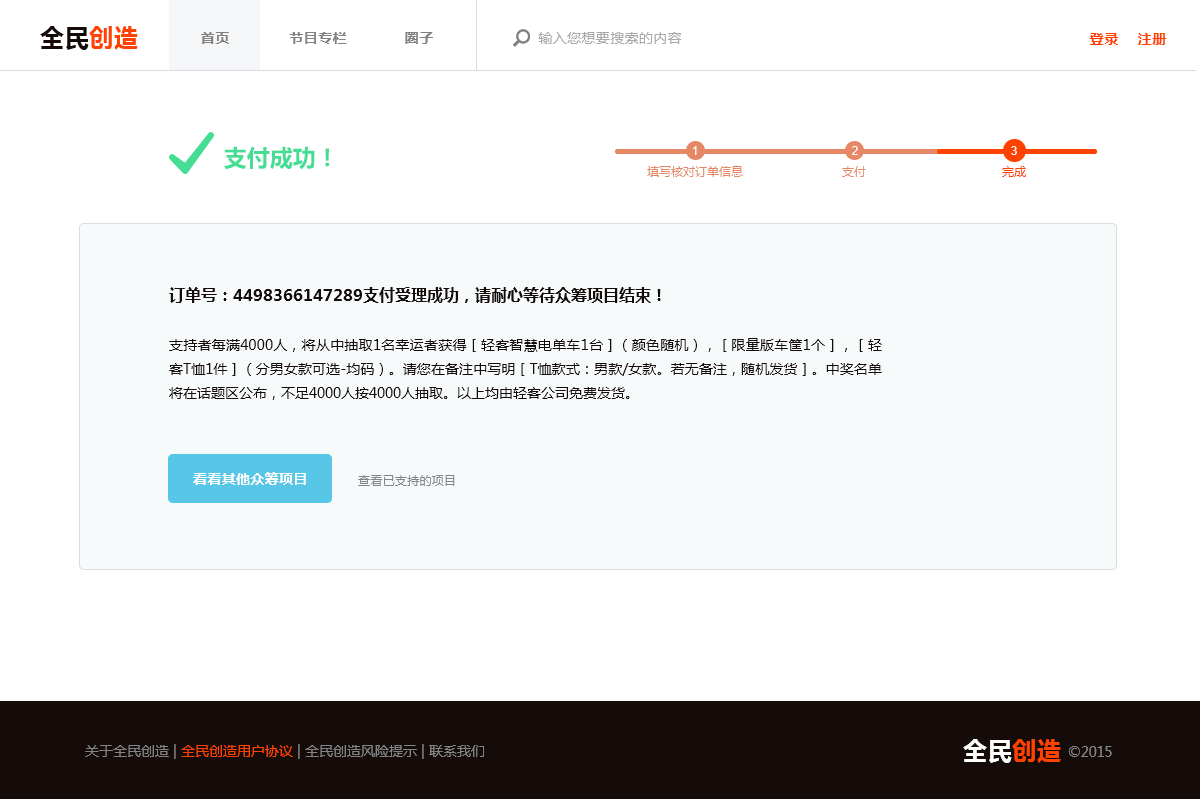
<style>
.page{position:relative;width:1200px;height:799px;background:#ffffff}
.page>*{position:absolute;margin:0}
.t1{font:24px "MicrosoftYaHei-Bold";letter-spacing:0.025em;color:#150b09}
.t2{font:24px "MicrosoftYaHei-Bold";letter-spacing:0.025em;color:#ff4200}
.t3{font:14px "MicrosoftYaHei-Bold";letter-spacing:0.025em;color:#828282}
.t4{font:14px "MicrosoftYaHei";letter-spacing:0.025em;color:#a9a9a9}
.t5{font:14px "MicrosoftYaHei-Bold";letter-spacing:0.05em;color:#ff4200}
.t6{font:23px "MicrosoftYaHei-Bold";color:#44dd93}
.t7{font:12px "ArialMT";letter-spacing:0.025em;color:#ffffff}
.t8{font:12px "MicrosoftYaHei";color:#e68766}
.t9{font:12px "MicrosoftYaHei";color:#ff4200}
.t10{font:16px "MicrosoftYaHei-Bold";color:#150b09}
.t11{font:14px/24px "MicrosoftYaHei";color:#150b09}
.t12{font:14px "MicrosoftYaHei-Bold";letter-spacing:0.025em;color:#ffffff}
.t13{font:12px "MicrosoftYaHei";letter-spacing:0.025em;color:#828587}
.t14{font:14px "MicrosoftYaHei";color:#828587}
.t15{font:14px "MicrosoftYaHei";color:#ff4200}
.t16{font:24px "MicrosoftYaHei-Bold";letter-spacing:0.025em;color:#ffffff}
</style>
<div class="page">
<p class="t1" style="left:40px;top:26px;width:98px;height:24px">全民<span class="t2">创造</span></p>
<p class="t3" style="left:201px;top:32px;width:28px;height:12px">首页</p>
<p class="t3" style="left:289px;top:32px;width:58px;height:12px">节目专栏</p>
<p class="t3" style="left:405px;top:32px;width:28px;height:12px">圈子</p>
<p class="t4" style="left:538px;top:32px;width:144px;height:12px">输入您想要搜索的内容</p>
<p class="t5" style="left:1089px;top:33px;width:30px;height:12px">登录</p>
<p class="t5" style="left:1138px;top:33px;width:29px;height:12px">注册</p>
<p class="t6" style="left:224px;top:146px;width:106px;height:24px">支付成功！</p>
<p class="t7" style="left:693px;top:146px;width:4px;height:9px">1</p>
<p class="t7" style="left:852px;top:146px;width:6px;height:9px">2</p>
<p class="t7" style="left:1011px;top:146px;width:6px;height:9px">3</p>
<p class="t8" style="left:647px;top:165px;width:96px;height:12px">填写核对订单信息</p>
<p class="t8" style="left:842px;top:166px;width:24px;height:11px">支付</p>
<p class="t9" style="left:1002px;top:166px;width:24px;height:11px">完成</p>
<p class="t10" style="left:169px;top:287px;width:492px;height:16px">订单号：4498366147289支付受理成功，请耐心等待众筹项目结束！</p>
<p class="t11" style="left:169px;top:338px;width:713px;height:62px;text-align:justify">支持者每满4000人，将从中抽取1名幸运者获得［轻客智慧电单车1台］（颜色随机），［限量版车筐1个］，［轻客T恤1件］（分男女款可选-均码）。请您在备注中写明［T恤款式：男款/女款。若无备注，随机发货］。中奖名单将在话题区公布，不足4000人按4000人抽取。以上均由轻客公司免费发货。</p>
<p class="t12" style="left:193px;top:472px;width:113px;height:13px">看看其他众筹项目</p>
<p class="t13" style="left:358px;top:475px;width:97px;height:11px">查看已支持的项目</p>
<p class="t14" style="left:85px;top:744px;width:399px;height:15px">关于全民创造 | <span class="t15">全民创造用户协议</span> | 全民创造风险提示 | 联系我们</p>
<p class="t16" style="left:963px;top:739px;width:98px;height:24px">全民<span class="t2">创造</span></p>
<p class="t14" style="left:1068px;top:746px;width:44px;height:11px">©2015</p>
</div>
